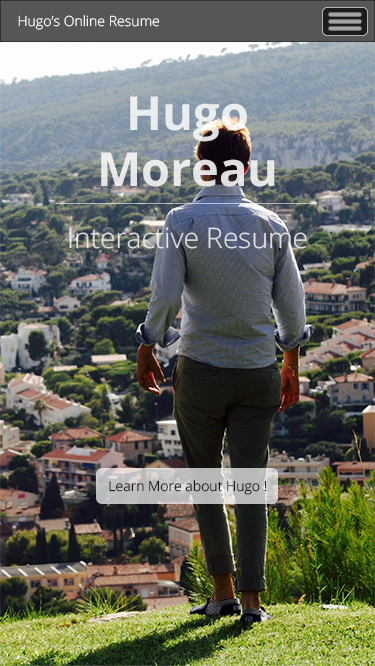
<style>
.page{position:relative;width:375px;height:666px}
.page>*{position:absolute;margin:0}
.t1{font:14.1px "OpenSans-Light";color:#ffffff}
.t2{font:46.9px "OpenSans-Bold";color:#ffffff}
.t3{font:28.1px "OpenSans-Light";color:#dedfe1}
.t4{font:14.1px "OpenSans-Light";color:#000000}
</style>
<div class="page">
<p class="t1" style="left:18px;top:15px;width:142px;height:15px">Hugo’s Online Resume</p>
<p class="t2" style="left:101px;top:96px;width:174px;height:91px;text-align:center;opacity:0.8">Hugo <br>Moreau</p>
<p class="t3" style="left:69px;top:227px;width:238px;height:22px">Interactive Resume</p>
<p class="t4" style="left:109px;top:480px;width:158px;height:15px">Learn More about Hugo !</p>
</div>
